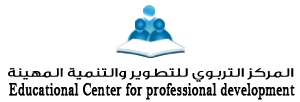
<style>
.page{position:relative;width:300px;height:102px;background:#ffffff}
.page>*{position:absolute;margin:0}
.t1{font:12.3px "GEDinarTwo-Light";color:#000000;font-weight:bold;scale:1.47 1}
.t2{font:18px "BellMT";color:#000000;font-weight:bold;scale:0.75 1}
</style>
<div class="page">
<p class="t1" style="left:7px;top:68px;width:287px;height:14px">المركز التربوي للتطوير والتنمية المهينة</p>
<p class="t2" style="left:9px;top:83px;width:286px;height:17px">Educational Center for professional development</p>
</div>
